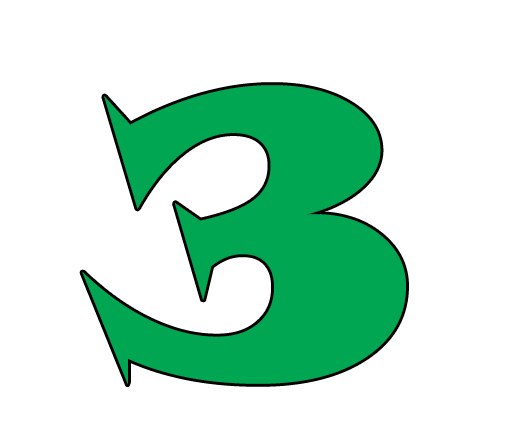
<style>
.page{position:relative;width:509px;height:422px;background:#ffffff}
.page>*{position:absolute;margin:0}
.t1{font:400px "SnapITC-Regular";color:#00a651}
</style>
<div class="page">
<p class="t1" style="left:82px;top:85px;width:324px;height:300px">3</p>
</div>
